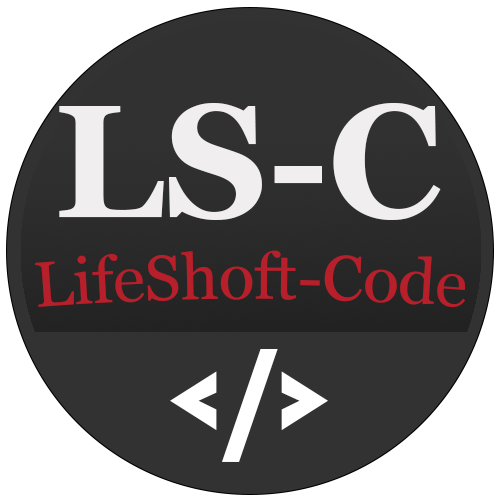
<style>
.page{position:relative;width:500px;height:500px;background:#ffffff}
.page>*{position:absolute;margin:0}
.t1{font:160px "Georgia-Bold";color:#f0eeee}
.t2{font:64px "Georgia";color:#b71f2b}
.t3{font:133.3px "Bahnschrift-Bold";color:#ffffff}
</style>
<div class="page">
<p class="t1" style="left:59px;top:103px;width:382px;height:117px">LS-C</p>
<p class="t2" style="left:35px;top:250px;width:431px;height:58px">LifeShoft-Code</p>
<p class="t3" style="left:170px;top:338px;width:158px;height:124px">&lt;/&gt;</p>
</div>
